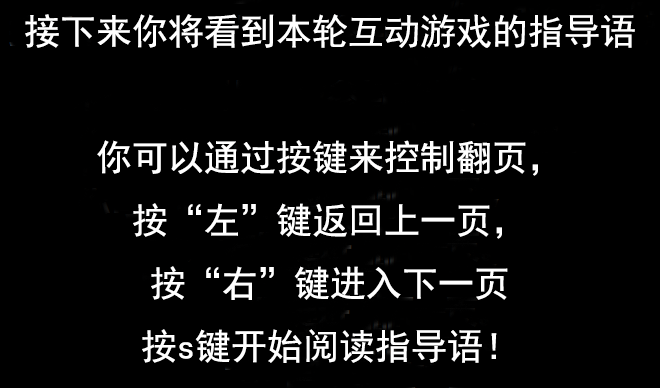
<style>
.page{position:relative;width:660px;height:388px;background:#000000}
.page>*{position:absolute;margin:0}
.t1{font:36px "SimHei";color:#ffffff}
</style>
<div class="page">
<p class="t1" style="left:25px;top:14px;width:610px;height:349px;text-align:center">接下来你将看到本轮互动游戏的指导语<br><br>你可以通过按键来控制翻页，<br>按“左”键返回上一页，<br>按“右”键进入下一页<br>按s键开始阅读指导语！</p>
</div>
